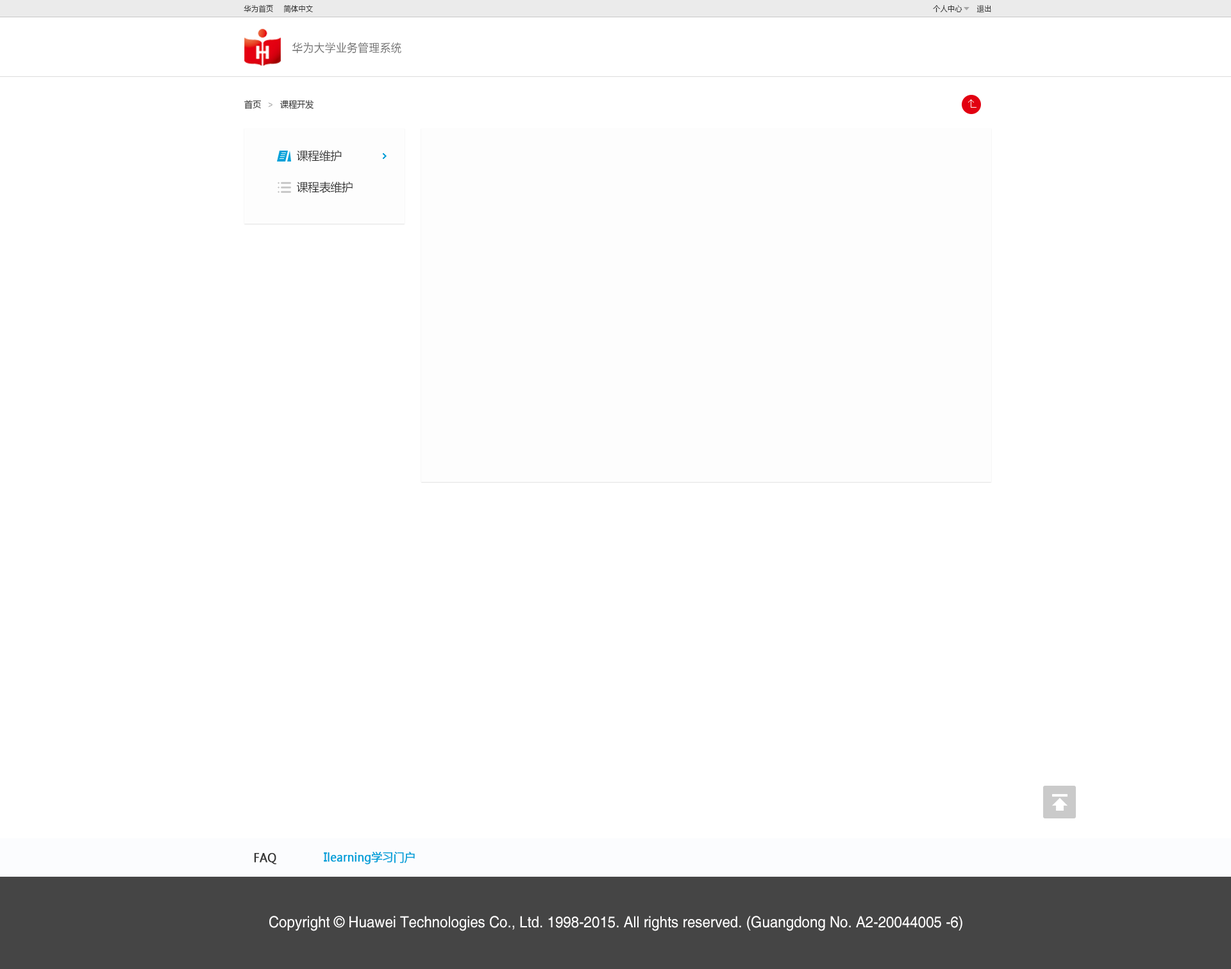
<style>
.page{position:relative;width:1231px;height:969px;background:#ffffff}
.page>*{position:absolute;margin:0}
.t1{font:7.7px "MicrosoftYaHei";letter-spacing:0.025em;color:#333333;scale:0.93 1}
.t2{font:11.5px "FZLTXHK";letter-spacing:0.025em;color:#666666;scale:0.93 1}
.t3{font:9px "MicrosoftYaHei";color:#333333;scale:0.93 1}
.t4{font:11.5px "MicrosoftYaHei";letter-spacing:-0.025em;color:#333333}
.t5{font:11.5px "MicrosoftYaHei";color:#333333;font-weight:bold;scale:0.93 1}
.t6{font:11.5px "MicrosoftYaHei";color:#00a1d9;font-weight:bold;scale:0.93 1}
.t7{font:15.4px "Helvetica";color:#fffefe;scale:0.93 1}
</style>
<div class="page">
<p class="t1" style="left:244px;top:5px;width:29px;height:8px">华为首页</p>
<p class="t1" style="left:283px;top:4px;width:30px;height:9px">简体中文</p>
<p class="t1" style="left:933px;top:5px;width:29px;height:7px">个人中心</p>
<p class="t1" style="left:976px;top:5px;width:15px;height:8px">退出</p>
<p class="t2" style="left:292px;top:42px;width:109px;height:11px">华为大学业务管理系统</p>
<p class="t3" style="left:244px;top:100px;width:17px;height:9px">首页</p>
<p class="t3" style="left:280px;top:100px;width:34px;height:10px">课程开发</p>
<p class="t4" style="left:297px;top:150px;width:45px;height:12px">课程维护</p>
<p class="t4" style="left:297px;top:181px;width:55px;height:12px">课程表维护</p>
<p class="t5" style="left:254px;top:853px;width:22px;height:12px">FAQ</p>
<p class="t6" style="left:324px;top:852px;width:91px;height:13px">Ilearning学习门户</p>
<p class="t7" style="left:269px;top:916px;width:693px;height:15px">Copyright © Huawei Technologies Co., Ltd. 1998-2015. All rights reserved. (Guangdong No. A2-20044005 -6)</p>
</div>
